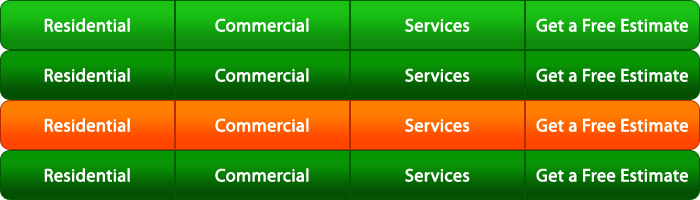
<style>
.page{position:relative;width:700px;height:200px}
.page>*{position:absolute;margin:0}
.t1{font:18px "MyriadPro-Regular";color:#ffffff;font-weight:bold}
</style>
<div class="page">
<p class="t1" style="left:44px;top:18px;width:86px;height:14px">Residential</p>
<p class="t1" style="left:215px;top:18px;width:94px;height:14px">Commercial</p>
<p class="t1" style="left:405px;top:18px;width:65px;height:14px">Services</p>
<p class="t1" style="left:536px;top:18px;width:152px;height:14px">Get a Free Estimate</p>
<p class="t1" style="left:44px;top:68px;width:86px;height:14px">Residential</p>
<p class="t1" style="left:215px;top:68px;width:94px;height:14px">Commercial</p>
<p class="t1" style="left:405px;top:68px;width:65px;height:14px">Services</p>
<p class="t1" style="left:536px;top:68px;width:152px;height:14px">Get a Free Estimate</p>
<p class="t1" style="left:44px;top:118px;width:86px;height:14px">Residential</p>
<p class="t1" style="left:215px;top:118px;width:94px;height:14px">Commercial</p>
<p class="t1" style="left:405px;top:118px;width:65px;height:14px">Services</p>
<p class="t1" style="left:536px;top:118px;width:152px;height:14px">Get a Free Estimate</p>
<p class="t1" style="left:44px;top:168px;width:86px;height:14px">Residential</p>
<p class="t1" style="left:215px;top:168px;width:94px;height:14px">Commercial</p>
<p class="t1" style="left:405px;top:168px;width:65px;height:14px">Services</p>
<p class="t1" style="left:536px;top:168px;width:152px;height:14px">Get a Free Estimate</p>
</div>
